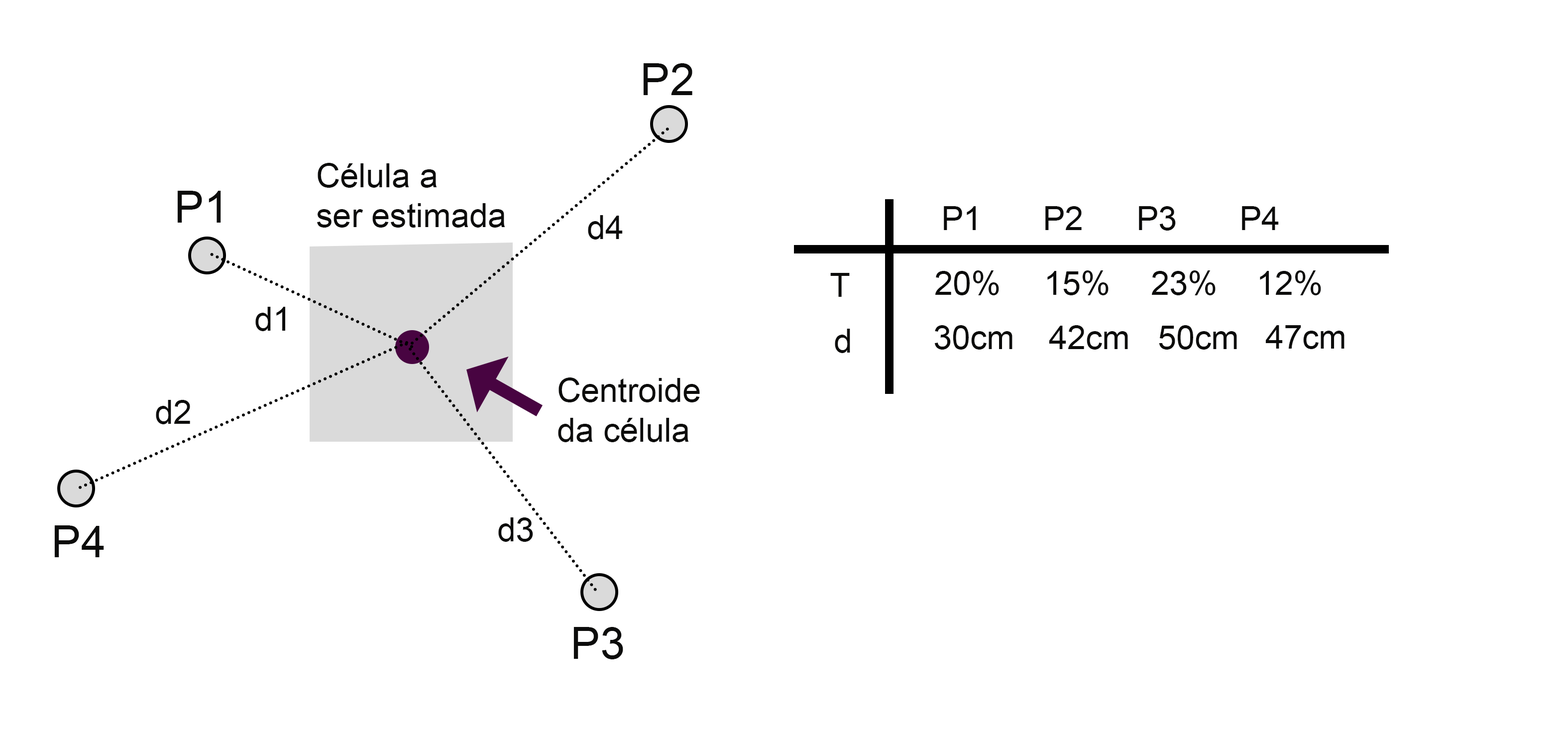
<style>
.page{position:relative;width:1568px;height:740px;background:#ffffff}
.page>*{position:absolute;margin:0}
.t1{font:44.2px "ArialMT";color:#0c0c0b}
.t2{font:33.2px "ArialMT";color:#0c0c0b}
</style>
<div class="page">
<p class="t1" style="left:643px;top:63px;width:49px;height:32px">P2</p>
<p class="t2" style="left:317px;top:163px;width:188px;height:64px">Célula a <br>ser estimada</p>
<p class="t1" style="left:177px;top:191px;width:44px;height:32px">P1</p>
<p class="t2" style="left:944px;top:206px;width:32px;height:24px">P1</p>
<p class="t2" style="left:1045px;top:206px;width:37px;height:24px">P2</p>
<p class="t2" style="left:1139px;top:206px;width:37px;height:24px">P3</p>
<p class="t2" style="left:1242px;top:206px;width:37px;height:24px">P4</p>
<p class="t2" style="left:588px;top:215px;width:35px;height:24px">d4</p>
<p class="t2" style="left:830px;top:273px;width:20px;height:24px">T</p>
<p class="t2" style="left:935px;top:270px;width:64px;height:25px">20%</p>
<p class="t2" style="left:1047px;top:270px;width:62px;height:25px">15%</p>
<p class="t2" style="left:1152px;top:270px;width:64px;height:25px">23%</p>
<p class="t2" style="left:1260px;top:270px;width:61px;height:25px">12%</p>
<p class="t2" style="left:255px;top:307px;width:30px;height:24px">d1</p>
<p class="t2" style="left:835px;top:329px;width:15px;height:24px">d</p>
<p class="t2" style="left:934px;top:325px;width:78px;height:24px">30cm</p>
<p class="t2" style="left:1049px;top:325px;width:79px;height:24px">42cm</p>
<p class="t2" style="left:1159px;top:325px;width:78px;height:24px">50cm</p>
<p class="t2" style="left:1265px;top:325px;width:79px;height:24px">47cm</p>
<p class="t2" style="left:558px;top:377px;width:142px;height:65px">Centroide <br>da célula</p>
<p class="t2" style="left:156px;top:400px;width:34px;height:24px">d2</p>
<p class="t2" style="left:498px;top:517px;width:35px;height:25px">d3</p>
<p class="t1" style="left:54px;top:525px;width:50px;height:32px">P4</p>
<p class="t1" style="left:573px;top:627px;width:50px;height:32px">P3</p>
</div>
